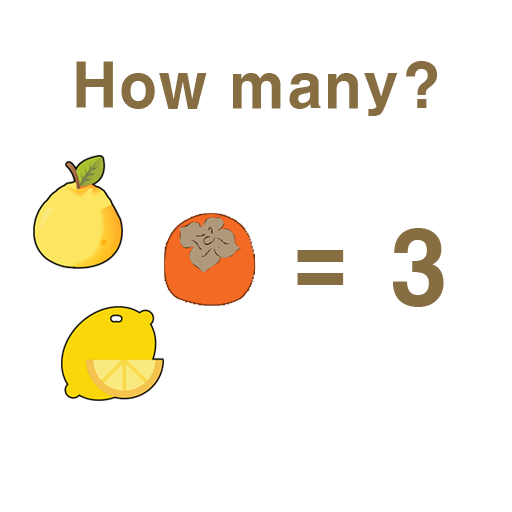
<style>
.page{position:relative;width:512px;height:512px;background:#ffffff}
.page>*{position:absolute;margin:0}
.t1{font:60px "H2gtrE";color:#866d42}
.t2{font:99.9px "H2gtrE";color:#866d42}
</style>
<div class="page">
<p class="t1" style="left:76px;top:61px;width:361px;height:55px">How many?</p>
<p class="t2" style="left:297px;top:228px;width:147px;height:79px">= 3</p>
</div>
